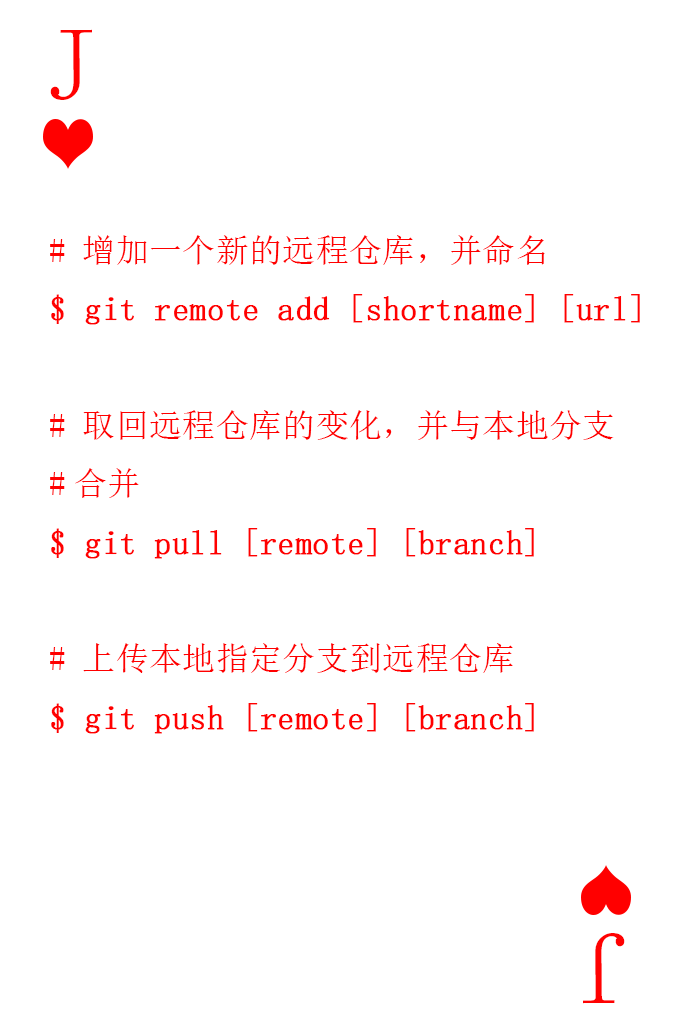
<style>
.page{position:relative;width:673px;height:1028px;background:#ffffff}
.page>*{position:absolute;margin:0}
.t1{font:104.2px "SimSun-ExtB";color:#ff0101;scale:0.93 1}
.t2{font:33.3px "SimSun";color:#ff0000;font-weight:bold}
.t3{font:33.3px "SimSun";color:#ff0000}
</style>
<div class="page">
<p class="t1" style="left:50px;top:29px;width:42px;height:71px">J</p>
<p class="t2" style="left:50px;top:235px;width:590px;height:499px"><span class="t3"># 增加一个新的远程仓库，并命名<br></span>$ git remote add [shortname] [url]<br><span class="t3"><br># 取回远程仓库的变化，并与本地分支<br>#合并<br></span>$ git pull [remote] [branch]<br><span class="t3"><br># 上传本地指定分支到远程仓库<br></span>$ git push [remote] [branch]</p>
<p class="t1" style="left:583px;top:933px;width:42px;height:71px;rotate:180deg">J</p>
</div>
